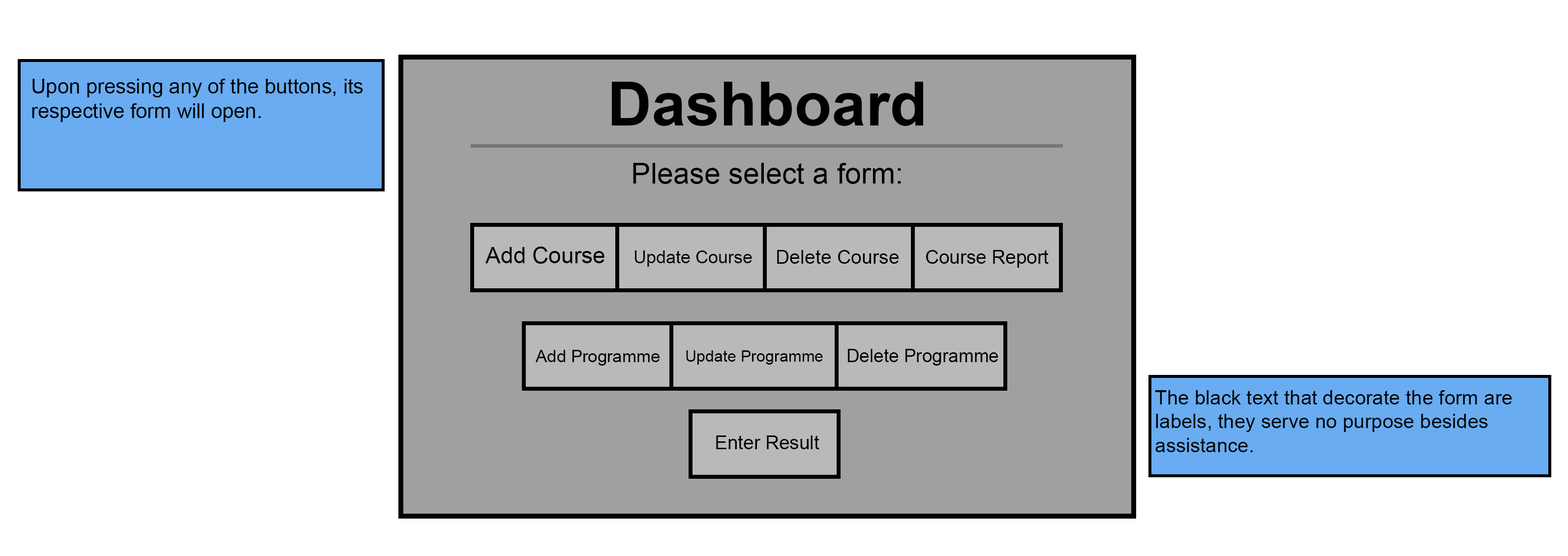
<style>
.page{position:relative;width:1568px;height:556px;background:#ffffff}
.page>*{position:absolute;margin:0}
.t1{font:20.5px "ArialMT";color:#000000}
.t2{font:61.2px "Arial-BoldMT";color:#000000}
.t3{font:29.1px "ArialMT";color:#000000}
.t4{font:22.7px "ArialMT";color:#000000}
.t5{font:17.7px "ArialMT";color:#000000}
.t6{font:19.4px "ArialMT";color:#000000}
.t7{font:19px "ArialMT";color:#000000}
.t8{font:17.1px "ArialMT";color:#000000}
.t9{font:15.9px "ArialMT";color:#000000}
.t10{font:18.2px "ArialMT";color:#000000}
.t11{font:19.9px "ArialMT";color:#000000}
</style>
<div class="page">
<p class="t1" style="left:32px;top:79px;width:331px;height:43px">Upon pressing any of the buttons, its<br>respective form will open.</p>
<p class="t2" style="left:611px;top:82px;width:312px;height:44px">Dashboard</p>
<p class="t3" style="left:633px;top:163px;width:268px;height:21px">Please select a form:</p>
<p class="t4" style="left:485px;top:246px;width:119px;height:18px">Add Course</p>
<p class="t5" style="left:634px;top:250px;width:118px;height:17px">Update Course</p>
<p class="t6" style="left:777px;top:250px;width:122px;height:14px">Delete Course</p>
<p class="t7" style="left:926px;top:250px;width:123px;height:18px">Course Report</p>
<p class="t8" style="left:535px;top:350px;width:125px;height:15px">Add Programme</p>
<p class="t9" style="left:686px;top:350px;width:137px;height:14px">Update Programme</p>
<p class="t10" style="left:847px;top:349px;width:151px;height:16px">Delete Programme</p>
<p class="t11" style="left:1155px;top:390px;width:357px;height:62px">The black text that decorate the form are <br>labels, they serve no purpose besides <br>assistance.</p>
<p class="t7" style="left:716px;top:435px;width:103px;height:14px">Enter Result</p>
</div>
